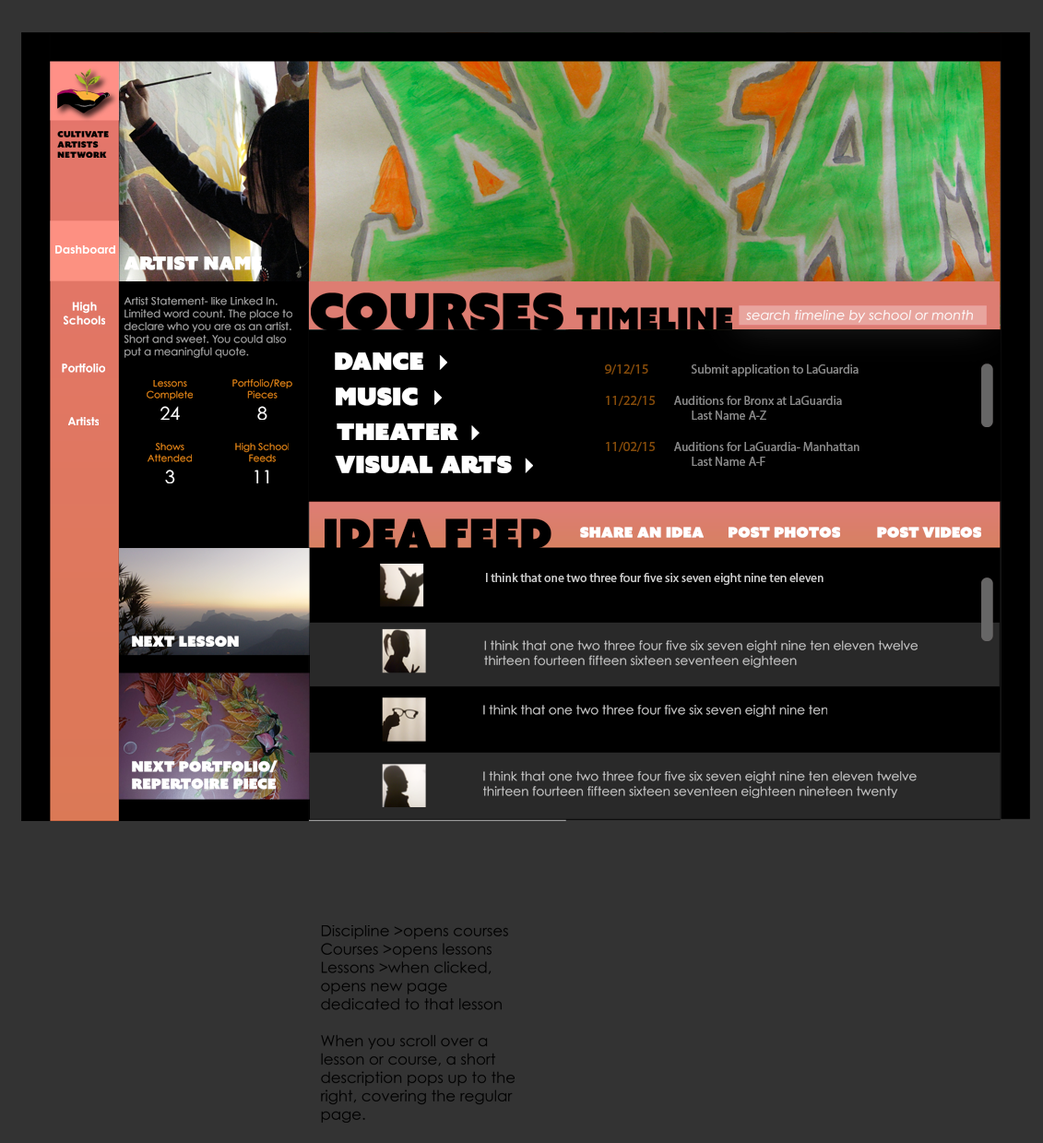
<style>
.page{position:relative;width:1043px;height:1143px;background:#333333}
.page>*{position:absolute;margin:0}
.t1{font:8.6px "AzoSansUber-Regular";color:#000000}
.t2{font:11.5px "CenturyGothic-Bold";color:#ffffff}
.t3{font:18.2px "AzoSansUber-Regular";color:#ffffff}
.t4{font:51px "AzoSansUber-Regular";color:#000000}
.t5{font:10.6px "CenturyGothic";color:#b3b3b3}
.t6{font:31px "AzoSansUber-Regular";color:#000000}
.t7{font:13.4px "CenturyGothic-Italic";color:#ffffff}
.t8{font:24px "AzoSansUber-Regular";color:#ffffff}
.t9{font:24px "LustDisplay-Regular";color:#ffffff}
.t10{font:24px "Webdings";color:#ffffff}
.t11{font:12.5px "MyriadPro-Regular";color:#888888}
.t12{font:13.4px "MyriadPro-Regular";color:#888888}
.t13{font:9.6px "CenturyGothic";color:#f7931e}
.t14{font:18.2px "CenturyGothic";color:#ffffff}
.t15{font:41.2px "AzoSansUber-Regular";color:#000000}
.t16{font:14.4px "AzoSansUber-Regular";color:#ffffff}
.t17{font:12.5px "MyriadPro-Regular";color:#cccccc}
.t18{font:12.5px "CenturyGothic";color:#cccccc}
.t19{font:15.3px "CenturyGothic";color:#000000}
</style>
<div class="page">
<p class="t1" style="left:57px;top:131px;width:52px;height:27px">Cultivate<br>Artists<br>Network</p>
<p class="t2" style="left:55px;top:245px;width:60px;height:9px">Dashboard</p>
<p class="t3" style="left:125px;top:256px;width:137px;height:14px">Artist Name</p>
<p class="t4" style="left:311px;top:292px;width:253px;height:39px">Courses</p>
<p class="t2" style="left:64px;top:302px;width:41px;height:23px;text-align:center">High Schools</p>
<p class="t5" style="left:125px;top:297px;width:167px;height:61px">Artist Statement- like Linked In. Limited word count. The place to declare who you are as an artist. Short and sweet. You could also put a meaningful quote.</p>
<p class="t6" style="left:577px;top:307px;width:155px;height:22px">Timeline</p>
<p class="t7" style="left:746px;top:310px;width:227px;height:13px">search timeline by school or month</p>
<p class="t8" style="left:335px;top:352px;width:112px;height:18px"><span class="t9">      </span>Dance <span class="t10">4</span></p>
<p class="t2" style="left:62px;top:363px;width:43px;height:10px">Portfolio</p>
<p class="t11" style="left:605px;top:364px;width:255px;height:102px"><span class="t12"><br>9/12/15 </span>  Submit application to LaGuardia<br><br><span class="t12">11/22/15</span>  Auditions for Bronx at LaGuardia <br>     Last Name A-Z<br><br><span class="t12">11/02/15</span>  Auditions for LaGuardia- Manhattan <br>     Last Name A-F</p>
<p class="t13" style="left:147px;top:380px;width:46px;height:40px;text-align:center">Lessons Complete<br><span class="t14">24</span></p>
<p class="t13" style="left:232px;top:379px;width:60px;height:41px;text-align:center">Portfolio/Rep<br>Pieces<br><span class="t14">8</span></p>
<p class="t8" style="left:336px;top:387px;width:106px;height:19px"><span class="t9">     </span>Music <span class="t10">4</span></p>
<p class="t2" style="left:68px;top:417px;width:31px;height:8px">Artists</p>
<p class="t8" style="left:337px;top:423px;width:143px;height:17px"><span class="t9">     </span>  Theater <span class="t10">4</span></p>
<p class="t13" style="left:148px;top:443px;width:44px;height:40px;text-align:center">Shows<br>Attended<br><span class="t14">3</span></p>
<p class="t13" style="left:235px;top:443px;width:54px;height:40px;text-align:center">High School<br>Feeds<br><span class="t14">11</span></p>
<p class="t8" style="left:335px;top:456px;width:198px;height:17px"><span class="t9">      </span>Visual Arts <span class="t10">4</span></p>
<p class="t15" style="left:325px;top:518px;width:227px;height:31px">Idea Feed</p>
<p class="t16" style="left:580px;top:527px;width:124px;height:11px">Share an Idea</p>
<p class="t16" style="left:729px;top:527px;width:111px;height:11px">Post Photos</p>
<p class="t16" style="left:877px;top:527px;width:105px;height:11px">Post Videos</p>
<p class="t17" style="left:486px;top:573px;width:338px;height:12px">I think that one two three four five six seven eight nine ten eleven</p>
<p class="t16" style="left:132px;top:636px;width:107px;height:11px">Next Lesson</p>
<p class="t18" style="left:484px;top:640px;width:434px;height:28px">I think that one two three four five six seven eight nine ten eleven twelve thirteen fourteen fifteen sixteen seventeen eighteen</p>
<p class="t18" style="left:483px;top:705px;width:344px;height:12px">I think that one two three four five six seven eight nine ten</p>
<p class="t16" style="left:132px;top:760px;width:146px;height:30px">Next Portfolio/<br>Repertoire Piece</p>
<p class="t18" style="left:483px;top:771px;width:434px;height:27px">I think that one two three four five six seven eight nine ten eleven twelve thirteen fourteen fifteen sixteen seventeen eighteen nineteen twenty</p>
<p class="t19" style="left:321px;top:925px;width:194px;height:198px">Discipline &gt;opens courses<br>Courses &gt;opens lessons<br>Lessons &gt;when clicked, opens new page dedicated to that lesson<br><br>When you scroll over a lesson or course, a short description pops up to the right, covering the regular page.</p>
</div>
